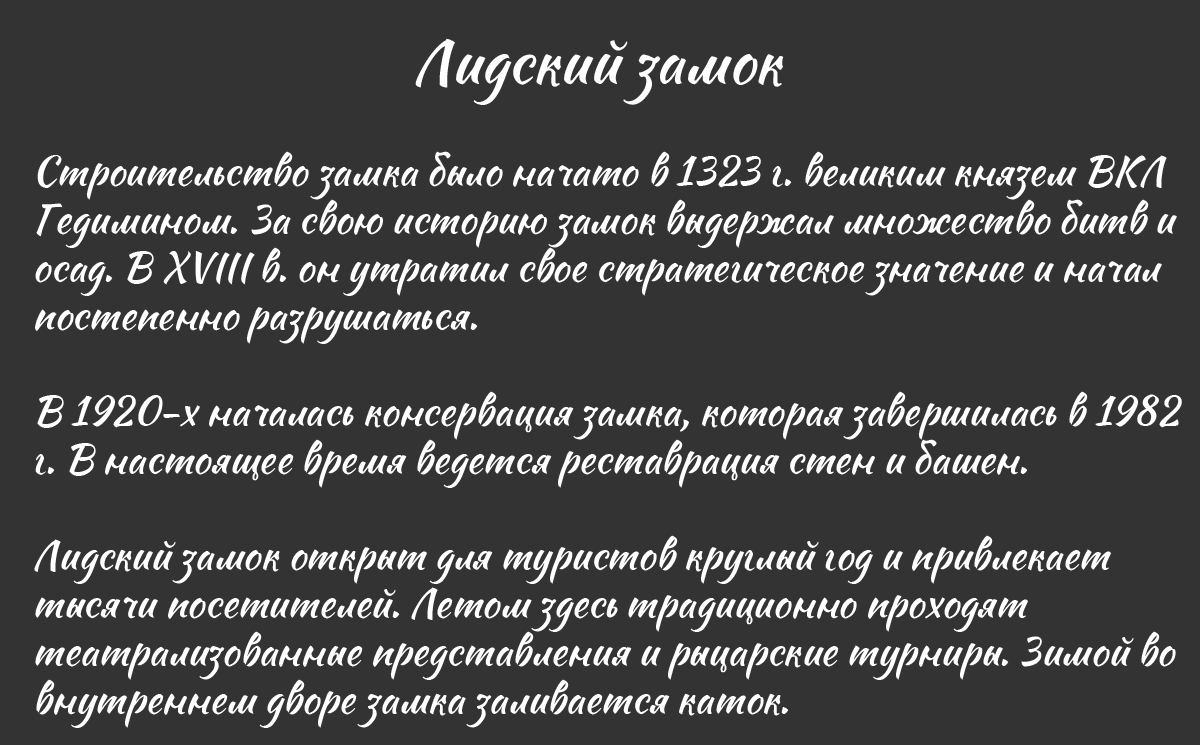
<style>
.page{position:relative;width:1200px;height:745px;background:#333333}
.page>*{position:absolute;margin:0}
.t1{font:60px "Sweet-Mavka-Script";color:#fefefe}
.t2{font:40px "Sweet-Mavka-Script";color:#ffffff}
</style>
<div class="page">
<p class="t1" style="left:415px;top:38px;width:369px;height:67px">Лидский замок</p>
<p class="t2" style="left:34px;top:151px;width:1148px;height:577px">Строительство замка было начато в 1323 г. великим князем ВКЛ <br>Гедимином. За свою историю замок выдержал множество битв и <br>осад. В XVIII в. он утратил свое стратегическое значение и начал <br>постепенно разрушаться.<br><br>В 1920-х началась консервация замка, которая завершилась в 1982 <br>г. В настоящее время ведется реставрация стен и башен.<br><br>Лидский замок открыт для туристов круглый год и привлекает <br>тысячи посетителей. Летом здесь традиционно проходят <br>театрализованные представления и рыцарские турниры. Зимой во <br>внутреннем дворе замка заливается каток.</p>
</div>
